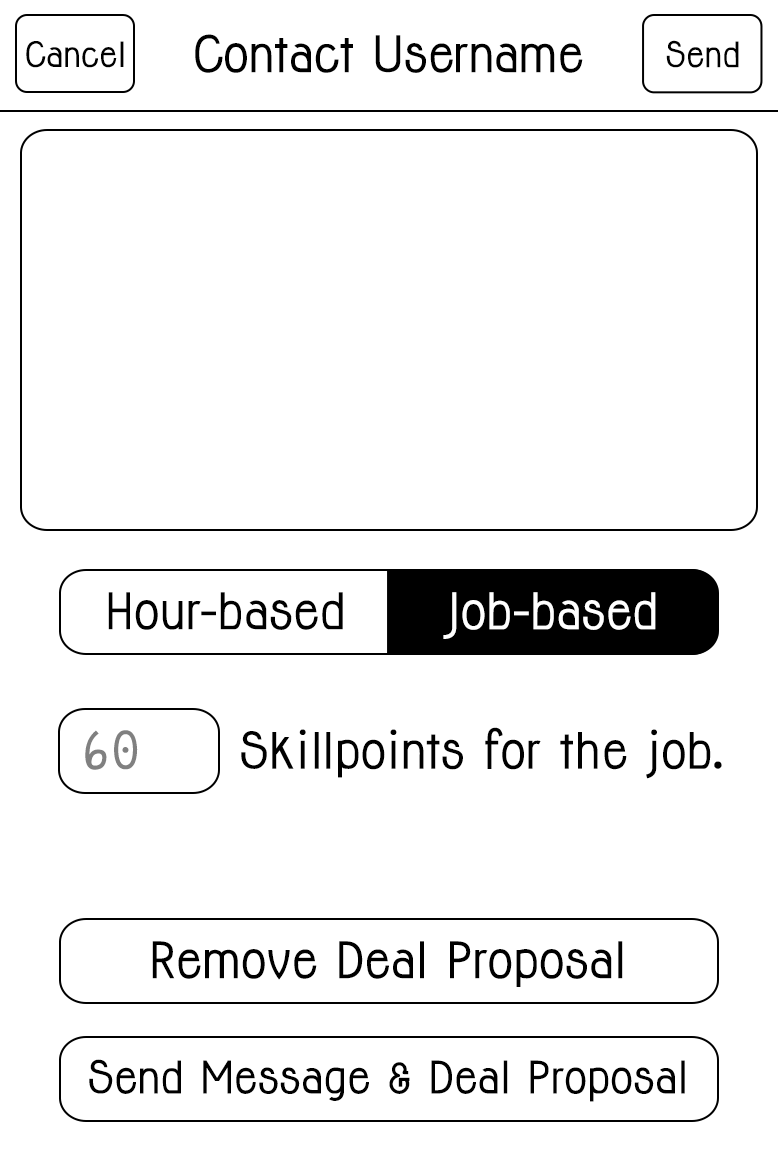
<style>
.page{position:relative;width:778px;height:1167px;background:#ffffff}
.page>*{position:absolute;margin:0}
.t1{font:32px "Jolly-Bold";color:#000000}
.t2{font:46.2px "Jolly-Bold";color:#000000}
.t3{font:32.1px "Jolly-Bold";color:#000000}
.t4{font:46.2px "Jolly-Bold";color:#ffffff}
.t5{font:48px "Jolly-Bold";color:#808080}
.t6{font:46px "Jolly-Bold";color:#000000}
.t7{font:41.3px "Jolly-Bold";color:#000000}
</style>
<div class="page">
<p class="t1" style="left:26px;top:41px;width:98px;height:27px">Cancel</p>
<p class="t2" style="left:195px;top:34px;width:388px;height:39px">Contact Username</p>
<p class="t3" style="left:666px;top:40px;width:73px;height:28px">Send</p>
<p class="t2" style="left:108px;top:592px;width:235px;height:38px">Hour-based</p>
<p class="t4" style="left:443px;top:592px;width:213px;height:47px">Job-based</p>
<p class="t5" style="left:85px;top:730px;width:53px;height:40px">60</p>
<p class="t6" style="left:241px;top:727px;width:481px;height:52px">Skillpoints for the job.</p>
<p class="t2" style="left:152px;top:941px;width:471px;height:46px">Remove Deal Proposal</p>
<p class="t7" style="left:89px;top:1059px;width:596px;height:43px">vvaattt</p>
</div>
